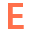
<style>
.page{position:relative;width:32px;height:32px;background:#ffffff}
.page>*{position:absolute;margin:0}
.t1{font:38.4px "MyriadPro-Semibold";color:#ff704c}
</style>
<div class="page">
<p class="t1" style="left:8px;top:3px;width:16px;height:26px">E</p>
</div>
